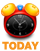
<style>
.page{position:relative;width:40px;height:51px;background:#ffffff}
.page>*{position:absolute;margin:0}
.t1{font:15.9px "PSL-EmpireExtraRegular";color:#f7941d}
</style>
<div class="page">
<p class="t1" style="left:2px;top:41px;width:37px;height:9px">TODAY</p>
</div>
